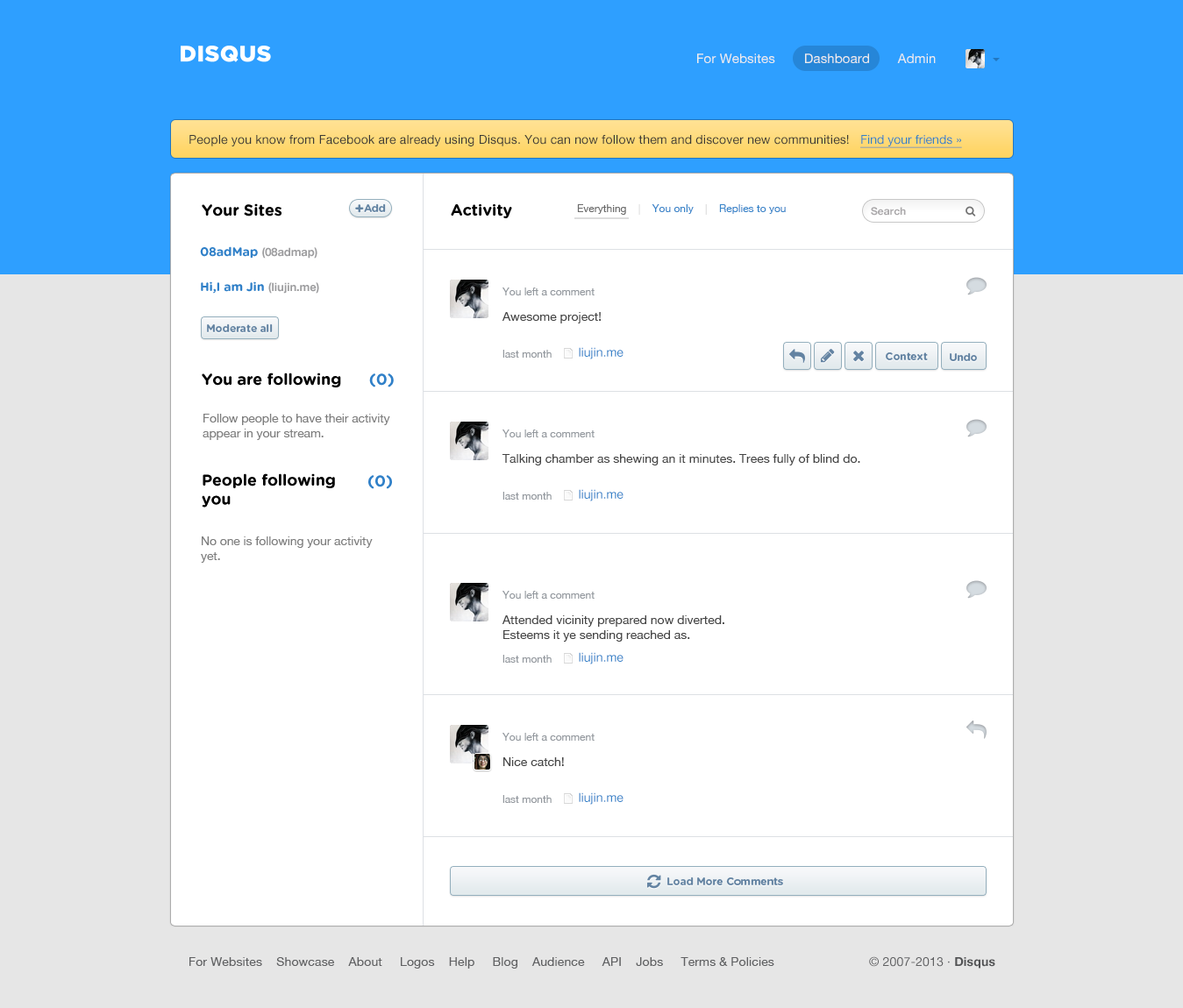
<style>
.page{position:relative;width:1183px;height:1008px;background:#ffffff}
.page>*{position:absolute;margin:0}
.t1{font:13.2px "HelveticaNeue";letter-spacing:0.01em;color:#ededed}
.t2{font:12.3px "HelveticaNeue";letter-spacing:0.014em;color:#3b3a35}
.t3{font:12.3px "HelveticaNeue";letter-spacing:0.001em;color:#3281c6;text-decoration:underline}
.t4{font:15.8px "GothamRounded-Bold";letter-spacing:-0.007em;color:#000000}
.t5{font:15.8px "GothamRounded-Bold";letter-spacing:-0.007em;color:#6383a2}
.t6{font:10.5px "GothamRounded-Bold";letter-spacing:-0.007em;color:#6383a2}
.t7{font:10.5px "HelveticaNeue";color:#3a86ca}
.t8{font:10.5px "HelveticaNeue";color:#6b6b6b}
.t9{font:10.5px "HelveticaNeue";color:#dddddd}
.t10{font:10.5px "HelveticaNeue-Bold";color:#aba9ab}
.t11{font:11.4px "HelveticaNeue-Bold";letter-spacing:-0.007em;color:#9d9d9f}
.t12{font:12.3px "GothamRounded-Bold";letter-spacing:-0.007em;color:#3080c8}
.t13{font:10.5px "HelveticaNeue";color:#94999f}
.t14{font:12.3px "HelveticaNeue";color:#454545}
.t15{font:12.3px "HelveticaNeue";color:#3885ca}
.t16{font:15.8px "GothamRounded-Bold";letter-spacing:-0.007em;color:#3080c8}
.t17{font:12.3px "HelveticaNeue";letter-spacing:-0.007em;color:#7d7d7d}
.t18{font:12.3px "HelveticaNeue";letter-spacing:0.01em;color:#606163}
.t19{font:12.3px "HelveticaNeue";letter-spacing:0.014em;color:#606163}
.t20{font:12.3px "HelveticaNeue-Bold";letter-spacing:0.014em;color:#525355}
</style>
<div class="page">
<p class="t1" style="left:697px;top:53px;width:78px;height:10px">For Websites</p>
<p class="t1" style="left:805px;top:53px;width:64px;height:10px">Dashboard</p>
<p class="t1" style="left:897px;top:53px;width:38px;height:10px">Admin</p>
<p class="t2" style="left:189px;top:135px;width:660px;height:11px">People you know from Facebook are already using Disqus. You can now follow them and discover new communities!</p>
<p class="t3" style="left:860px;top:135px;width:102px;height:13px">Find your friends »</p>
<p class="t4" style="left:202px;top:203px;width:79px;height:14px">Your Sites</p>
<p class="t5" style="left:355px;top:204px;width:9px;height:9px">+</p>
<p class="t6" style="left:364px;top:203px;width:22px;height:9px">Add</p>
<p class="t4" style="left:451px;top:204px;width:61px;height:14px">Activity</p>
<p class="t7" style="left:577px;top:204px;width:209px;height:11px"><span class="t8">Everything    </span><span class="t9">|    </span>You only    <span class="t9">|    </span>Replies to you</p>
<p class="t10" style="left:871px;top:207px;width:35px;height:9px">Search</p>
<p class="t11" style="left:200px;top:246px;width:117px;height:13px"><span class="t12">08adMap </span>(08admap)</p>
<p class="t12" style="left:201px;top:281px;width:118px;height:13px">Hi,I am Jin <span class="t11">(liujin.me)</span></p>
<p class="t13" style="left:501px;top:288px;width:93px;height:7px">You left a comment</p>
<p class="t14" style="left:501px;top:312px;width:100px;height:12px">Awesome project!</p>
<p class="t6" style="left:207px;top:324px;width:66px;height:8px">Moderate all</p>
<p class="t13" style="left:502px;top:350px;width:49px;height:8px">last month</p>
<p class="t15" style="left:579px;top:347px;width:44px;height:12px">liujin.me</p>
<p class="t6" style="left:885px;top:352px;width:43px;height:8px">Context</p>
<p class="t6" style="left:949px;top:352px;width:28px;height:9px">Undo</p>
<p class="t4" style="left:202px;top:373px;width:192px;height:15px">You are following      <span class="t16">(0)</span></p>
<p class="t17" style="left:203px;top:414px;width:187px;height:26px">Follow people to have their activity <br>appear in your stream.</p>
<p class="t13" style="left:501px;top:430px;width:93px;height:7px">You left a comment</p>
<p class="t14" style="left:501px;top:454px;width:359px;height:12px">Talking chamber as shewing an it minutes. Trees fully of blind do.</p>
<p class="t4" style="left:202px;top:473px;width:133px;height:35px">People following<br>you</p>
<p class="t16" style="left:368px;top:475px;width:24px;height:14px">(0)</p>
<p class="t13" style="left:502px;top:492px;width:49px;height:8px">last month</p>
<p class="t15" style="left:579px;top:489px;width:44px;height:12px">liujin.me</p>
<p class="t17" style="left:201px;top:537px;width:172px;height:26px">No one is following your activity <br>yet.</p>
<p class="t13" style="left:501px;top:591px;width:93px;height:8px">You left a comment</p>
<p class="t14" style="left:501px;top:615px;width:223px;height:27px">Attended vicinity prepared now diverted. <br>Esteems it ye sending reached as.</p>
<p class="t15" style="left:579px;top:652px;width:44px;height:13px">liujin.me</p>
<p class="t13" style="left:502px;top:655px;width:49px;height:8px">last month</p>
<p class="t13" style="left:501px;top:733px;width:93px;height:8px">You left a comment</p>
<p class="t14" style="left:503px;top:757px;width:61px;height:9px">Nice catch!</p>
<p class="t13" style="left:502px;top:795px;width:49px;height:8px">last month</p>
<p class="t15" style="left:579px;top:793px;width:44px;height:12px">liujin.me</p>
<p class="t6" style="left:667px;top:877px;width:116px;height:8px">Load More Comments</p>
<p class="t18" style="left:189px;top:957px;width:585px;height:12px">For Websites    Showcase    About     Logos    Help     Blog    Audience     API    Jobs     Terms &amp; Policies</p>
<p class="t19" style="left:869px;top:957px;width:126px;height:12px">© 2007-2013 · <span class="t20">Disqus</span></p>
</div>
